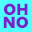
<style>
.page{position:relative;width:32px;height:32px;background:#50ffff}
.page>*{position:absolute;margin:0}
.t1{font:15px/12.9px "TMTLimkin-ExtraBoldSans";letter-spacing:0.04em;color:#7822cc}
</style>
<div class="page">
<p class="t1" style="left:3px;top:3px;width:25px;height:26px">OH<br>NO</p>
</div>
